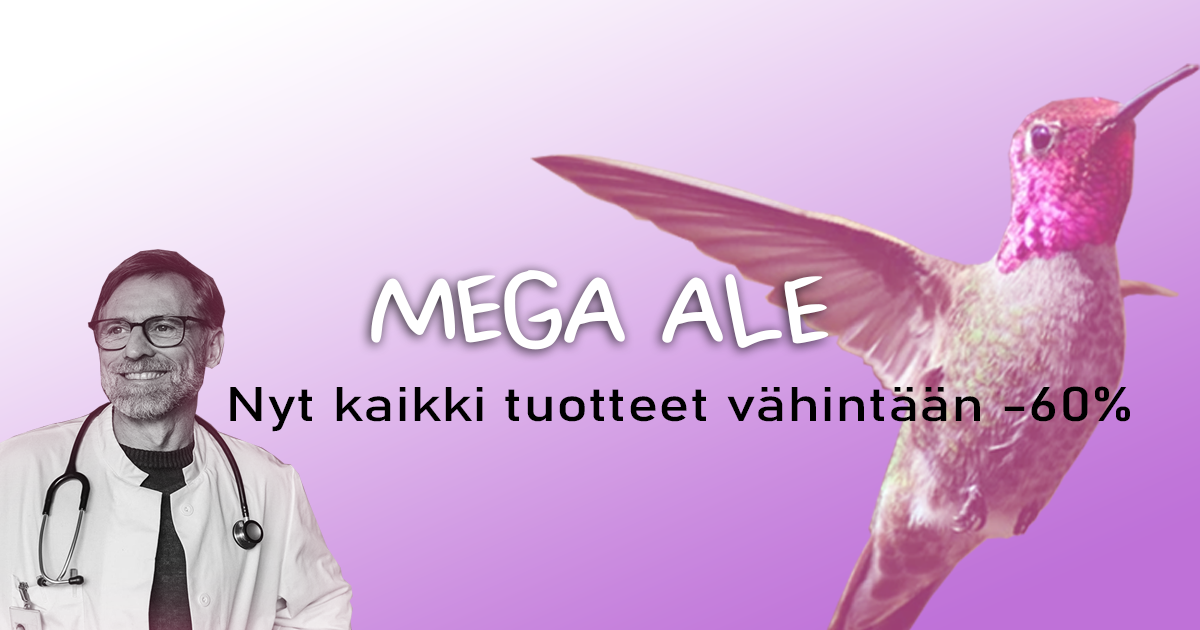
<style>
.page{position:relative;width:1200px;height:630px}
.page>*{position:absolute;margin:0}
.t1{font:105.3px "Brendohand-Regular";color:#ffffff;scale:1.23 1}
.t2{font:48px "Bahnschrift";color:#000000;scale:1.24 1}
</style>
<div class="page">
<p class="t1" style="left:371px;top:270px;width:458px;height:80px">MEGA ALE</p>
<p class="t2" style="left:230px;top:386px;width:900px;height:46px">Nyt kaikki tuotteet vähintään -60%</p>
</div>
